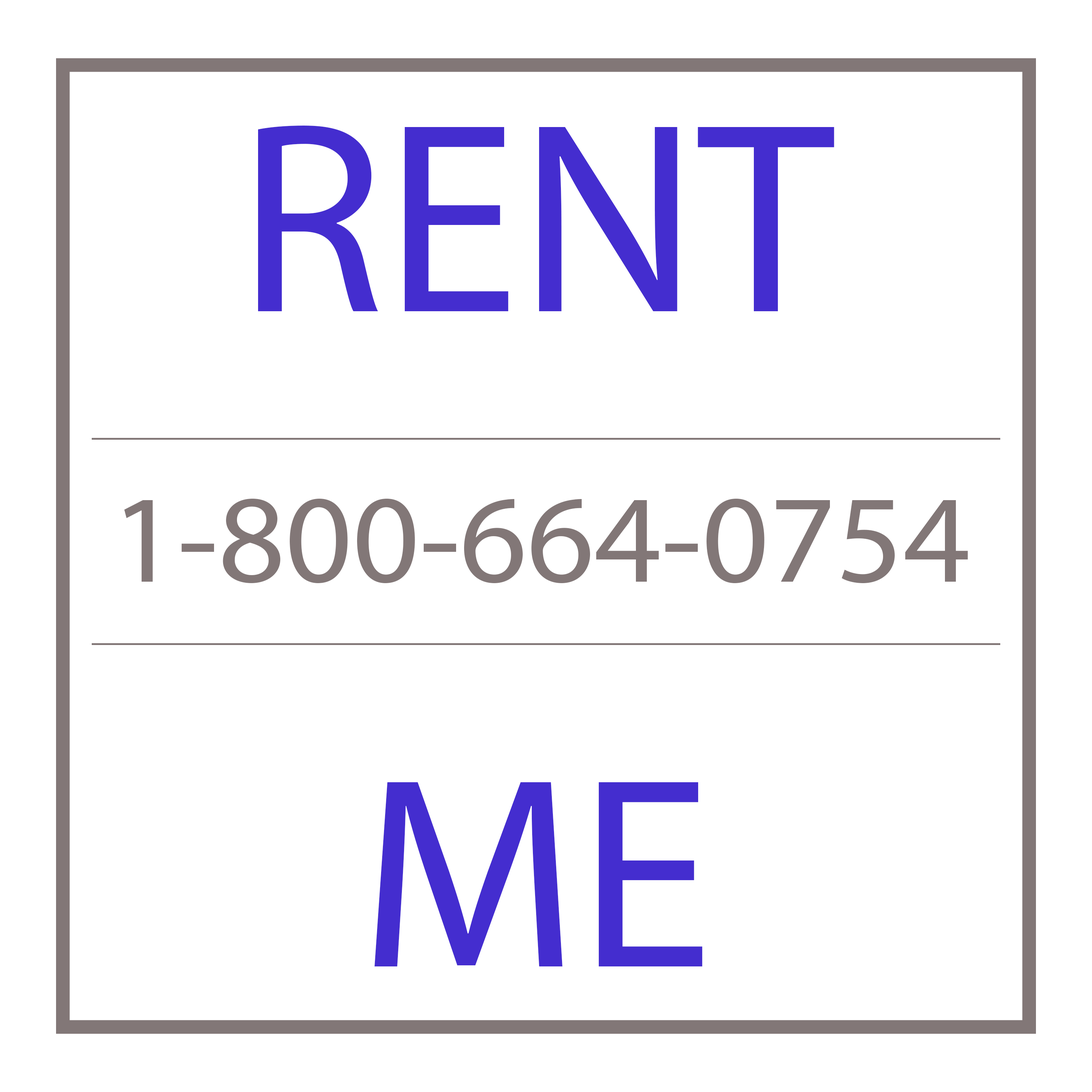
<style>
.page{position:relative;width:1092px;height:1092px;background:#ffffff}
.page>*{position:absolute;margin:0}
.t1{font:273px "MyriadPro-Regular";color:#442dcf}
.t2{font:125.6px "MyriadPro-Regular";color:#827777;scale:1.04 1}
</style>
<div class="page">
<p class="t1" style="left:258px;top:126px;width:576px;height:840px;text-align:center">RENT<br><br>ME</p>
<p class="t2" style="left:124px;top:498px;width:844px;height:85px">1-800-664-0754</p>
</div>
